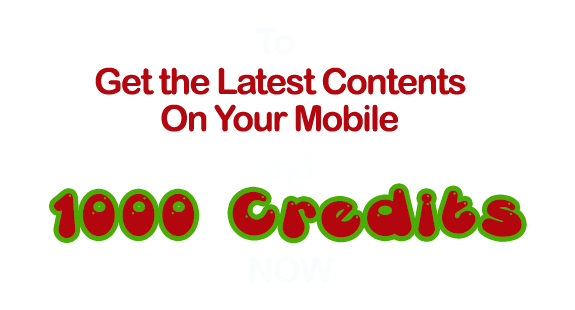
<style>
.page{position:relative;width:575px;height:310px;background:#ffffff}
.page>*{position:absolute;margin:0}
.t1{font:36px "ArialRoundedMTBold";letter-spacing:-0.05em;color:#f9fdfd}
.t2{font:36px "ArialRoundedMTBold";letter-spacing:-0.05em;color:#b3060e}
.t3{font:45.8px "GretoonHighlight";letter-spacing:0.17em;color:#b3060e}
.t4{font:36px "ArialRoundedMTBold";letter-spacing:-0.05em;color:#fafdfd}
</style>
<div class="page">
<p class="t1" style="left:255px;top:28px;width:39px;height:27px">To</p>
<p class="t2" style="left:95px;top:67px;width:371px;height:28px">Get the Latest Contents</p>
<p class="t2" style="left:161px;top:104px;width:237px;height:28px">On Your Mobile</p>
<p class="t3" style="left:54px;top:188px;width:468px;height:51px">1000 Credits</p>
<p class="t4" style="left:249px;top:256px;width:84px;height:28px">NOW</p>
</div>
